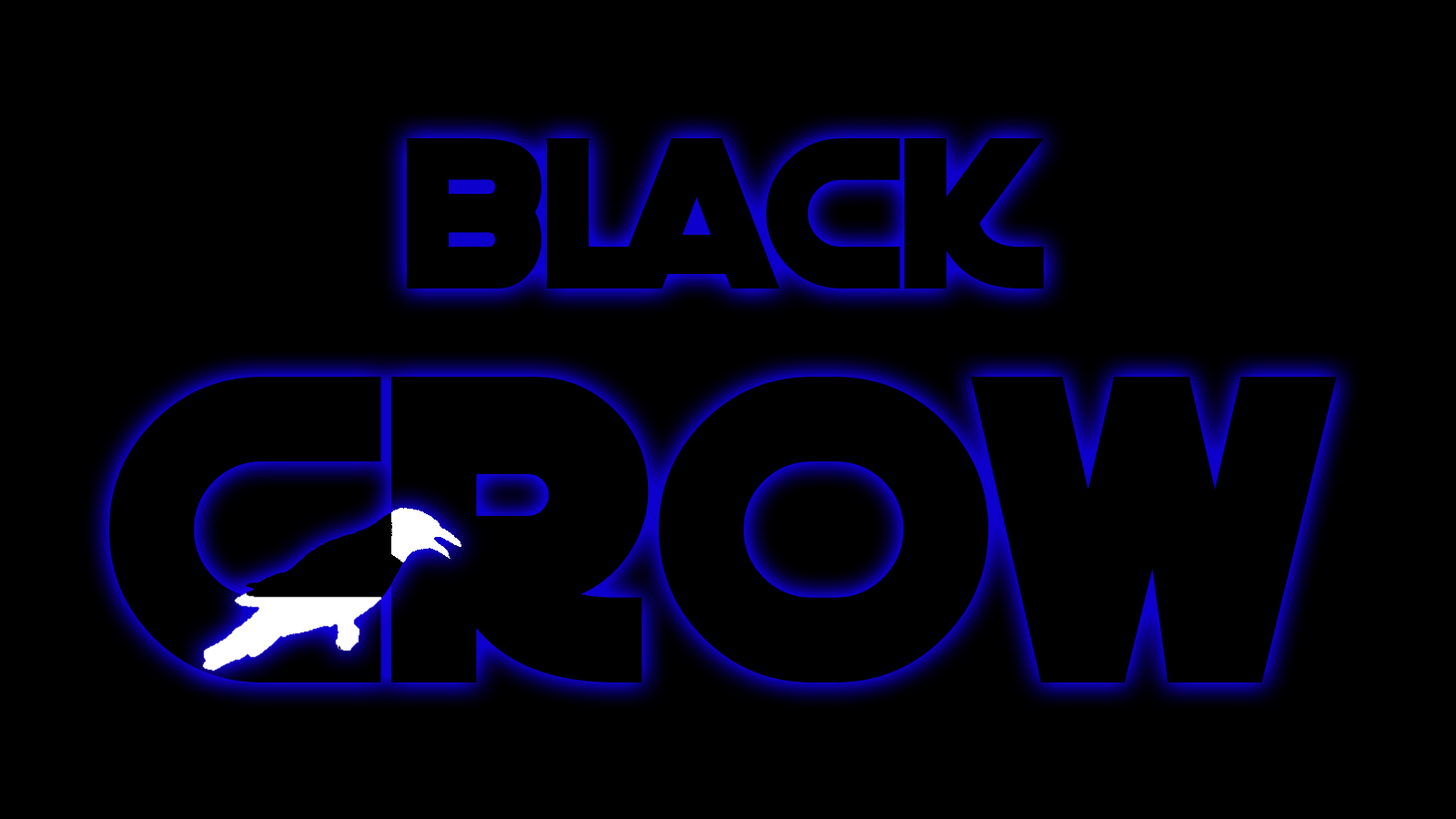
<style>
.page{position:relative;width:1456px;height:819px;background:#000000}
.page>*{position:absolute;margin:0}
.t1{font:212.4px "DeathStar";color:#000000}
.t2{font:432.2px "DeathStar";color:#000000}
</style>
<div class="page">
<p class="t1" style="left:407px;top:138px;width:637px;height:151px">Black</p>
<p class="t2" style="left:109px;top:376px;width:1228px;height:306px">Crow</p>
</div>
